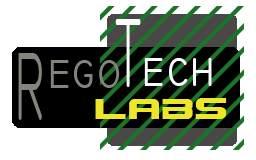
<style>
.page{position:relative;width:256px;height:160px;background:#ffffff}
.page>*{position:absolute;margin:0}
.t1{font:96px "Technic";color:#ffffff;scale:0.5 1}
.t2{font:96px "Technic";color:#84847d;scale:0.5 1}
.t3{font:48px "Technic";color:#84847d}
.t4{font:48px "Technic";color:#ffffff}
.t5{font:32px "Gunship";color:#ede629}
</style>
<div class="page">
<p class="t1" style="left:115px;top:19px;width:26px;height:68px">T</p>
<p class="t2" style="left:18px;top:53px;width:24px;height:67px">R</p>
<p class="t3" style="left:50px;top:60px;width:70px;height:28px">ego</p>
<p class="t4" style="left:144px;top:58px;width:68px;height:28px">ech</p>
<p class="t5" style="left:95px;top:98px;width:132px;height:21px">LABs</p>
</div>
